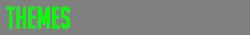
<style>
.page{position:relative;width:250px;height:35px;background:#808080}
.page>*{position:absolute;margin:0}
.t1{font:30px "BigNoodleTitling";color:#00ff00}
</style>
<div class="page">
<p class="t1" style="left:6px;top:6px;width:64px;height:23px">THEMES</p>
</div>
